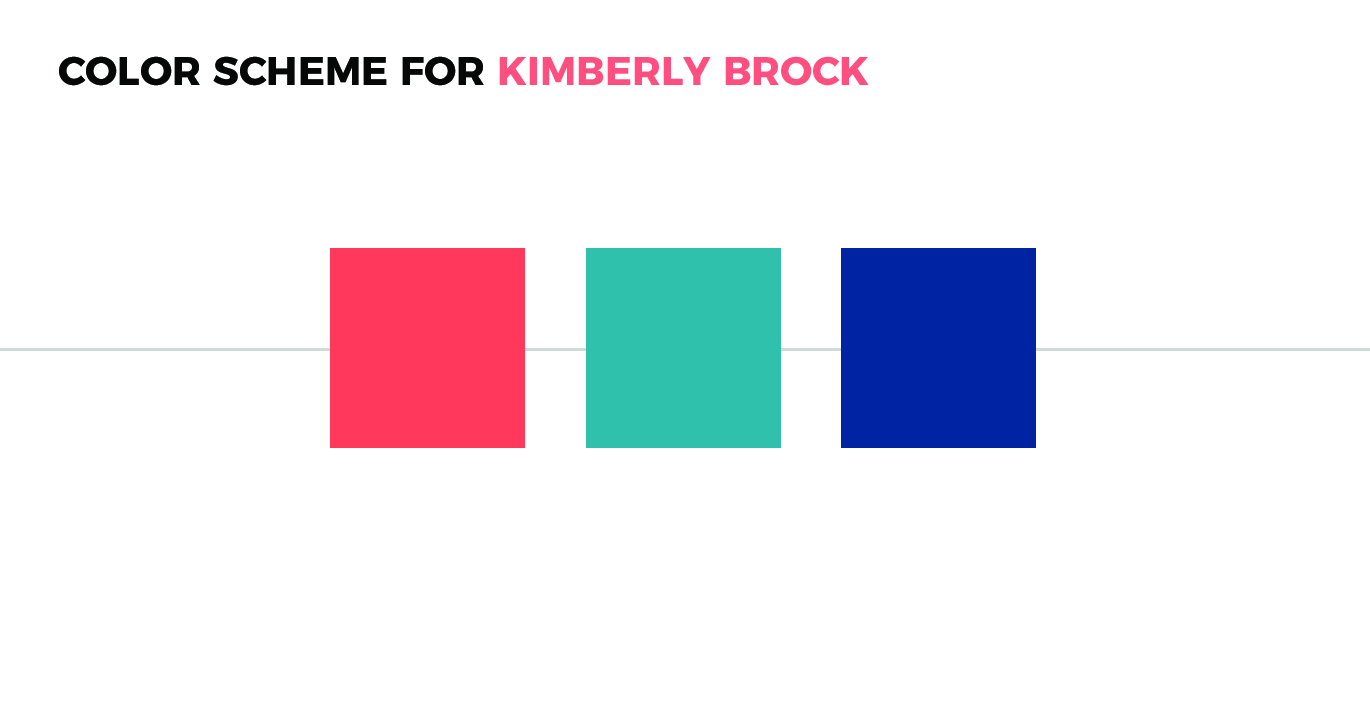
<style>
.page{position:relative;width:1370px;height:712px;background:#ffffff}
.page>*{position:absolute;margin:0}
.t1{font:40px "Montserrat-Bold";color:#060808;text-transform:uppercase}
.t2{font:40px "Montserrat-Bold";color:#ff4f81;text-transform:uppercase}
</style>
<div class="page">
<p class="t1" style="left:59px;top:56px;width:810px;height:30px">Color Scheme for <span class="t2">kimberly brock</span></p>
</div>
